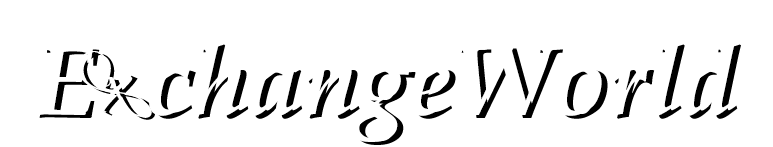
<style>
.page{position:relative;width:773px;height:147px;background:#ffffff}
.page>*{position:absolute;margin:0}
.t1{font:100px "BookAntiqua-BoldItalic"}
.t2{font:65px "Vivaldii";color:#000000}
</style>
<div class="page">
<p class="t1" style="left:39px;top:44px;width:702px;height:101px">E  changeWorld</p>
<p class="t2" style="left:83px;top:54px;width:72px;height:66px;rotate:62deg">X</p>
</div>
